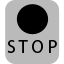
<style>
.page{position:relative;width:64px;height:64px;background:#bababa}
.page>*{position:absolute;margin:0}
.t1{font:18px "MyriadPro-Regular";color:#000000}
</style>
<div class="page">
<p class="t1" style="left:7px;top:40px;width:50px;height:13px">S T O P</p>
</div>
